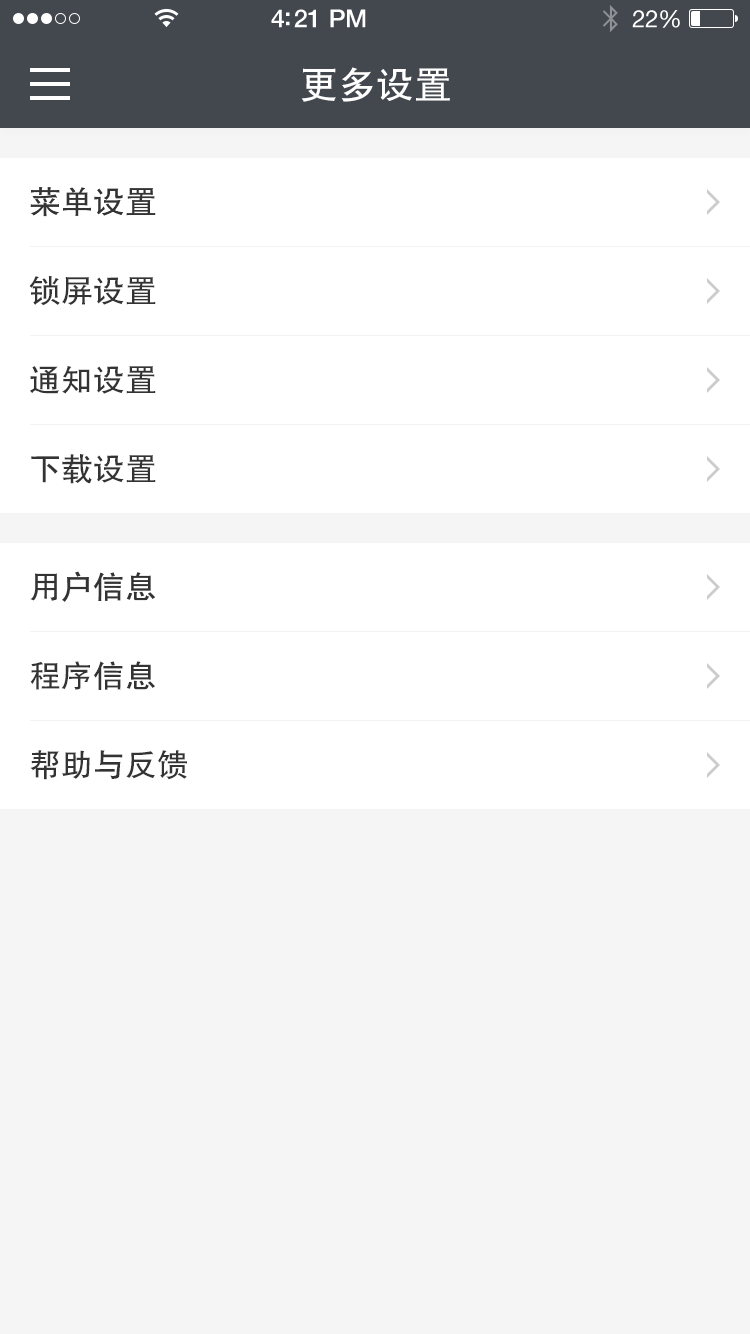
<style>
.page{position:relative;width:750px;height:1334px;background:#ffffff}
.page>*{position:absolute;margin:0}
.t1{font:38px "FZHTJW--GB1-0";color:#ffffff}
.t2{font:32px "FZHTJW--GB1-0";color:#333333}
.t3{font:32.1px "FZHTJW--GB1-0";color:#333333}
</style>
<div class="page">
<p class="t1" style="left:301px;top:67px;width:149px;height:35px">更多设置</p>
<p class="t2" style="left:30px;top:187px;width:126px;height:30px">菜单设置</p>
<p class="t3" style="left:29px;top:276px;width:127px;height:30px">锁屏设置</p>
<p class="t3" style="left:30px;top:365px;width:126px;height:29px">通知设置</p>
<p class="t3" style="left:31px;top:454px;width:125px;height:30px">下载设置</p>
<p class="t2" style="left:30px;top:571px;width:125px;height:31px">用户信息</p>
<p class="t3" style="left:30px;top:661px;width:125px;height:29px">程序信息</p>
<p class="t3" style="left:30px;top:750px;width:157px;height:30px">帮助与反馈</p>
</div>
